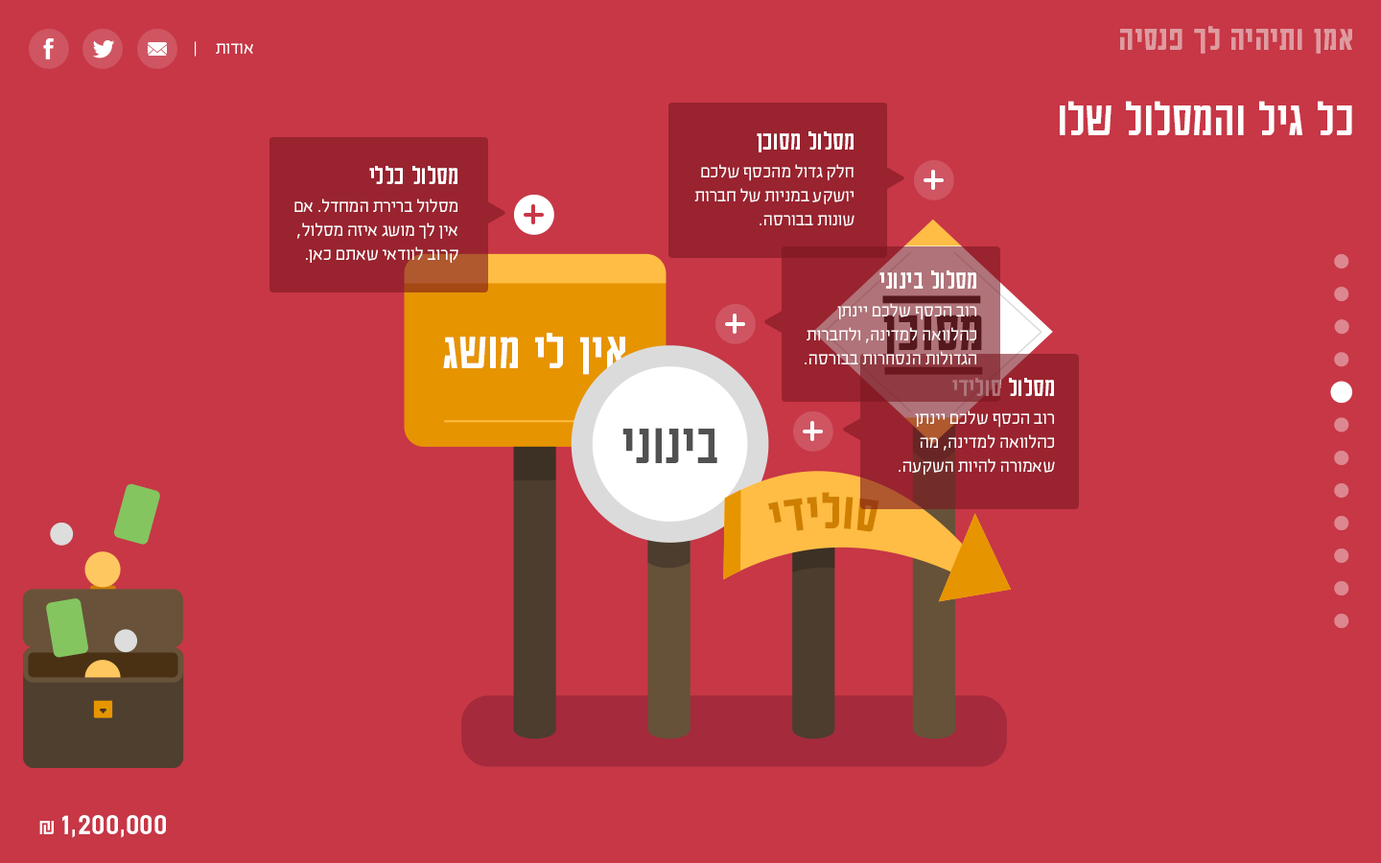
<style>
.page{position:relative;width:1381px;height:863px;background:#c73746}
.page>*{position:absolute;margin:0}
.t1{font:37.8px "AdumaFOT-Medium";color:#de9ba0}
.t2{font:19.2px "EzerBlock_OE-Light";color:#ffffff}
.t3{font:53.8px "AdumaFOT-Regular";color:#ffffff}
.t4{font:19.2px/24px "EzerBlock_OE-Light";color:#ffffff}
.t5{font:28.8px "AdumaFOT-Regular";color:#ffffff}
.t6{font:63.2px "AdumaFOT-Medium";color:#55181d}
.t7{font:56.6px "AdumaFOT-Regular";color:#ffffff}
.t8{font:63.2px "AdumaFOT-Regular";color:#515151}
.t9{font:57.6px "AdumaFOT-Medium";color:#ce7f00}
.t10{font:33.6px "AdumaFOT-Regular";color:#ffffff}
.t11{font:24px "AdumaFOT-Regular";color:#ffffff}
</style>
<div class="page">
<p class="t1" style="left:1120px;top:26px;width:232px;height:28px">אמן ותיהיה לך פנסיה</p>
<p class="t2" style="left:195px;top:41px;width:58px;height:16px">אודות     |</p>
<p class="t3" style="left:1060px;top:101px;width:292px;height:34px">כל גיל והמסלול שלו</p>
<p class="t4" style="left:694px;top:131px;width:161px;height:95px"><span class="t5">מסלול מסוכן<br><br></span>חלק גדול מהכסף שלכם יושקע במניות של חברות שונות בבורסה.</p>
<p class="t4" style="left:294px;top:166px;width:165px;height:98px"><span class="t5">מסלול כללי<br><br></span>מסלול ברירת המחדל. אם אין לך מושג איזה מסלול, קרוב לוודאי שאתם כאן.</p>
<p class="t4" style="left:805px;top:270px;width:171px;height:95px"><span class="t5">מסלול בינוני<br><br></span>רוב הכסף שלכם יינתן כהלוואה למדינה, ולחברות הגדולות הנסחרות בבורסה.</p>
<p class="t6" style="left:883px;top:315px;width:99px;height:42px">מסוכן</p>
<p class="t7" style="left:443px;top:333px;width:182px;height:42px">אין לי מושג</p>
<p class="t4" style="left:899px;top:378px;width:156px;height:98px"><span class="t5">מסלול סולידי<br><br></span>רוב הכסף שלכם יינתן כהלוואה למדינה, מה שאמורה להיות השקעה.</p>
<p class="t8" style="left:623px;top:428px;width:94px;height:35px">בינוני</p>
<p class="t9" style="left:768px;top:492px;width:112px;height:40px">סולידי</p>
<p class="t10" style="left:39px;top:815px;width:127px;height:23px">1,200,000<span class="t11"> ₪</span></p>
</div>
